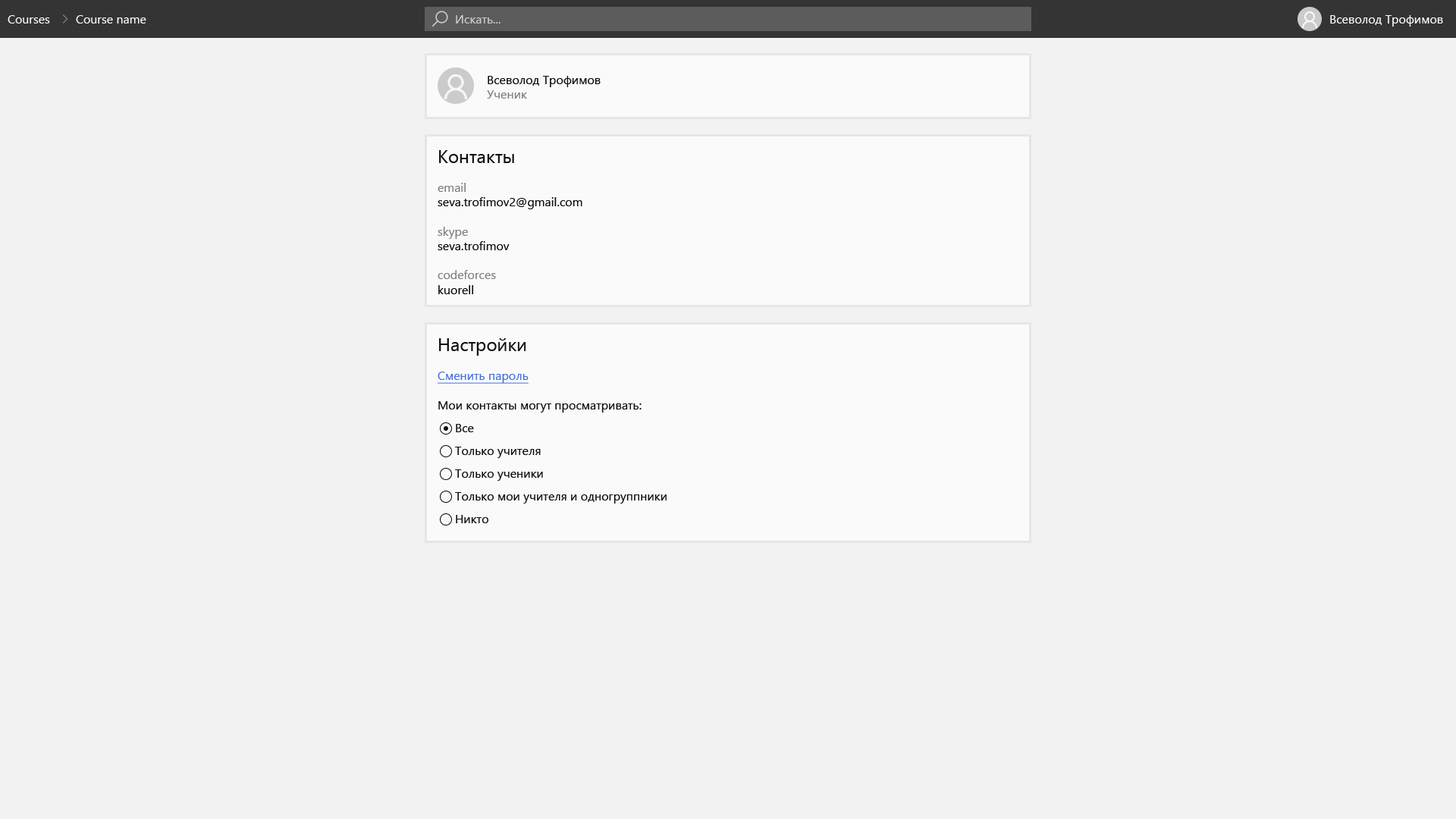
<style>
.page{position:relative;width:1456px;height:819px;background:#f2f2f2}
.page>*{position:absolute;margin:0}
.t1{font:12.1px "SegoeUI";color:#fafafa}
.t2{font:12.1px "SegoeUI";color:#cbcbcb}
.t3{font:12.1px "SegoeUI";color:#0f0f0f}
.t4{font:12.1px "SegoeUI";color:#808080}
.t5{font:18.2px "SegoeUI";color:#0f0f0f}
.t6{font:12.1px/22.7px "SegoeUI";color:#0f0f0f}
.t7{font:12.1px "SegoeUI";color:#4670dc;text-decoration:underline}
</style>
<div class="page">
<p class="t1" style="left:8px;top:15px;width:42px;height:9px">Courses</p>
<p class="t1" style="left:76px;top:15px;width:70px;height:9px">Course name</p>
<p class="t2" style="left:456px;top:15px;width:44px;height:9px">Искать...</p>
<p class="t1" style="left:1330px;top:15px;width:113px;height:12px">Всеволод Трофимов</p>
<p class="t3" style="left:487px;top:76px;width:114px;height:23px">Всеволод Трофимов<br><span class="t4">Ученик</span></p>
<p class="t3" style="left:438px;top:150px;width:144px;height:144px"><span class="t5">Контакты<br></span><span class="t4"><br>email<br></span>seva.trofimov2@gmail.com <br><span class="t4"><br>skype<br></span>seva.trofimov <br><span class="t4"><br>codeforces<br></span>kuorell</p>
<p class="t6" style="left:438px;top:338px;width:229px;height:185px"><span class="t5">Настройки<br><br></span><span class="t7">Сменить пароль<br><br></span><span class="t3">Мои контакты могут просматривать:<br></span>Все<br>Только учителя<br>Только ученики<br>Только мои учителя и одногруппники<br>Никто</p>
</div>
